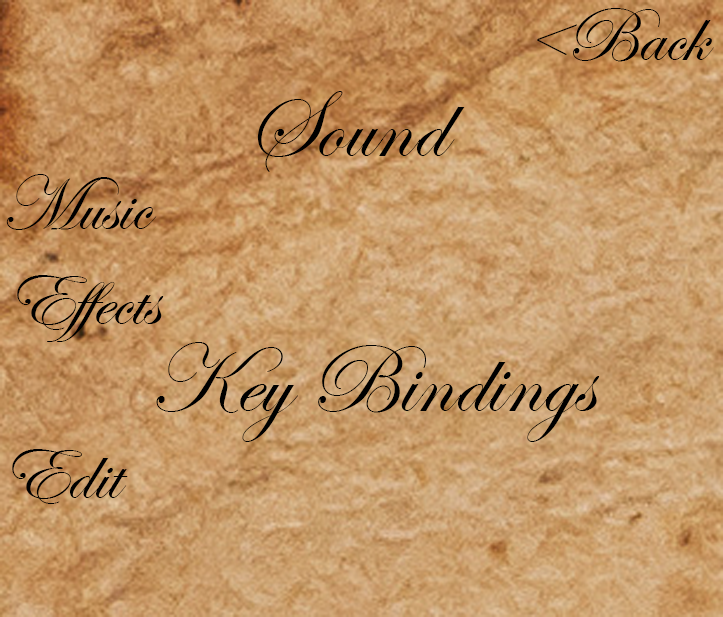
<style>
.page{position:relative;width:723px;height:617px}
.page>*{position:absolute;margin:0}
.t1{font:78.5px "EdwardianScriptITC";color:#000000}
.t2{font:98.1px "EdwardianScriptITC";color:#000000}
</style>
<div class="page">
<p class="t1" style="left:537px;top:8px;width:177px;height:54px">&lt;Back</p>
<p class="t2" style="left:257px;top:91px;width:208px;height:81px">Sound</p>
<p class="t1" style="left:6px;top:174px;width:151px;height:56px">Music</p>
<p class="t1" style="left:17px;top:275px;width:147px;height:67px">Effects</p>
<p class="t2" style="left:156px;top:342px;width:444px;height:100px">Key Bindings</p>
<p class="t1" style="left:12px;top:449px;width:116px;height:55px">Edit</p>
</div>
